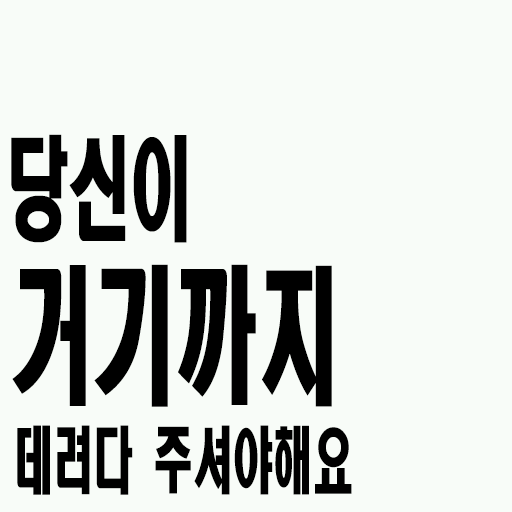
<style>
.page{position:relative;width:512px;height:512px;background:#f8fcf8}
.page>*{position:absolute;margin:0}
.t1{font:111.6px "HeadlineR-HM";color:#000000;scale:0.56 1}
.t2{font:147.6px "HeadlineR-HM";color:#000000;scale:0.56 1}
.t3{font:72px "HeadlineR-HM";color:#000000;scale:0.56 1}
</style>
<div class="page">
<p class="t1" style="left:11px;top:134px;width:176px;height:109px">당신이</p>
<p class="t2" style="left:12px;top:264px;width:320px;height:143px">거기까지</p>
<p class="t3" style="left:17px;top:425px;width:335px;height:70px">데려다 주셔야해요</p>
</div>
